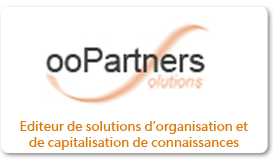
<style>
.page{position:relative;width:273px;height:160px;background:#ffffff}
.page>*{position:absolute;margin:0}
.t1{font:14px/16.1px "Myriad-Web";letter-spacing:0.005em;color:#da7b0b}
</style>
<div class="page">
<p class="t1" style="left:20px;top:121px;width:228px;height:29px;text-align:center">Editeur de solutions d’organisation et<br>de capitalisation de connaissances</p>
</div>
